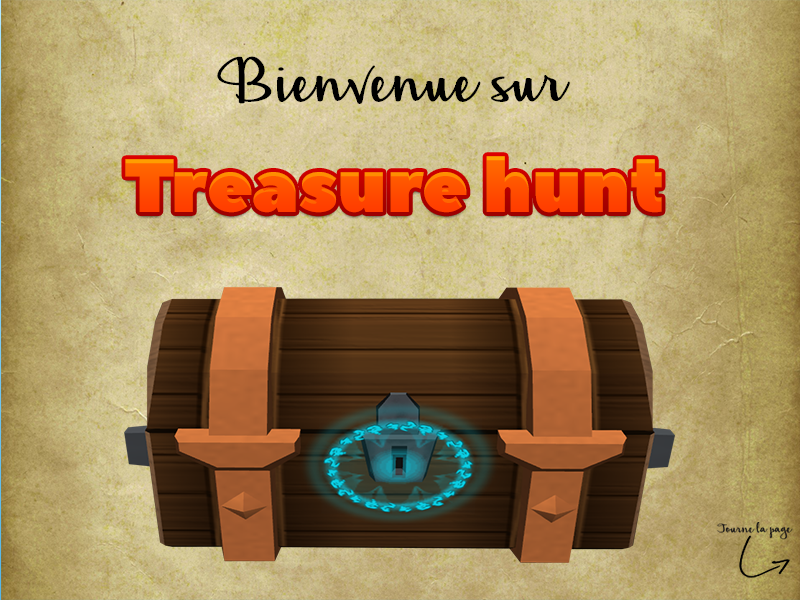
<style>
.page{position:relative;width:800px;height:600px}
.page>*{position:absolute;margin:0}
.t1{font:100px "HickoryJack";color:#000000}
.t2{font:75px "PeaceSans";color:#ff5000}
</style>
<div class="page">
<p class="t1" style="left:217px;top:56px;width:353px;height:48px">Bienvenue sur</p>
<p class="t2" style="left:125px;top:156px;width:537px;height:57px">Treasure hunt</p>
</div>
